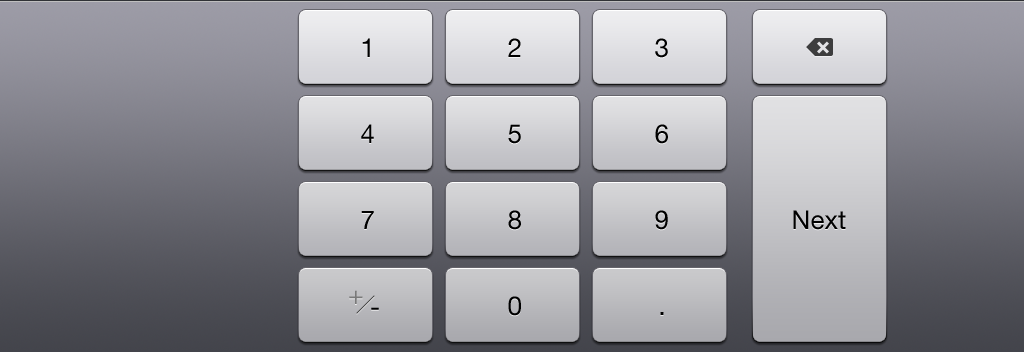
<style>
.page{position:relative;width:1024px;height:352px}
.page>*{position:absolute;margin:0}
.t1{font:26px "HelveticaNeue";color:#000000}
.t2{font:26px "HelveticaNeue";color:#797979}
</style>
<div class="page">
<p class="t1" style="left:362px;top:38px;width:8px;height:19px">1</p>
<p class="t1" style="left:508px;top:38px;width:13px;height:19px">2</p>
<p class="t1" style="left:655px;top:38px;width:13px;height:20px">3</p>
<p class="t1" style="left:361px;top:124px;width:13px;height:19px">4</p>
<p class="t1" style="left:508px;top:124px;width:13px;height:20px">5</p>
<p class="t1" style="left:655px;top:124px;width:13px;height:20px">6</p>
<p class="t1" style="left:361px;top:211px;width:13px;height:18px">7</p>
<p class="t1" style="left:508px;top:210px;width:13px;height:20px">8</p>
<p class="t1" style="left:655px;top:210px;width:13px;height:20px">9</p>
<p class="t1" style="left:793px;top:210px;width:53px;height:20px">Next</p>
<p class="t2" style="left:349px;top:290px;width:14px;height:14px">+</p>
<p class="t1" style="left:508px;top:296px;width:13px;height:20px">0</p>
<p class="t1" style="left:371px;top:307px;width:8px;height:3px">-</p>
<p class="t1" style="left:660px;top:312px;width:4px;height:3px">.</p>
</div>
